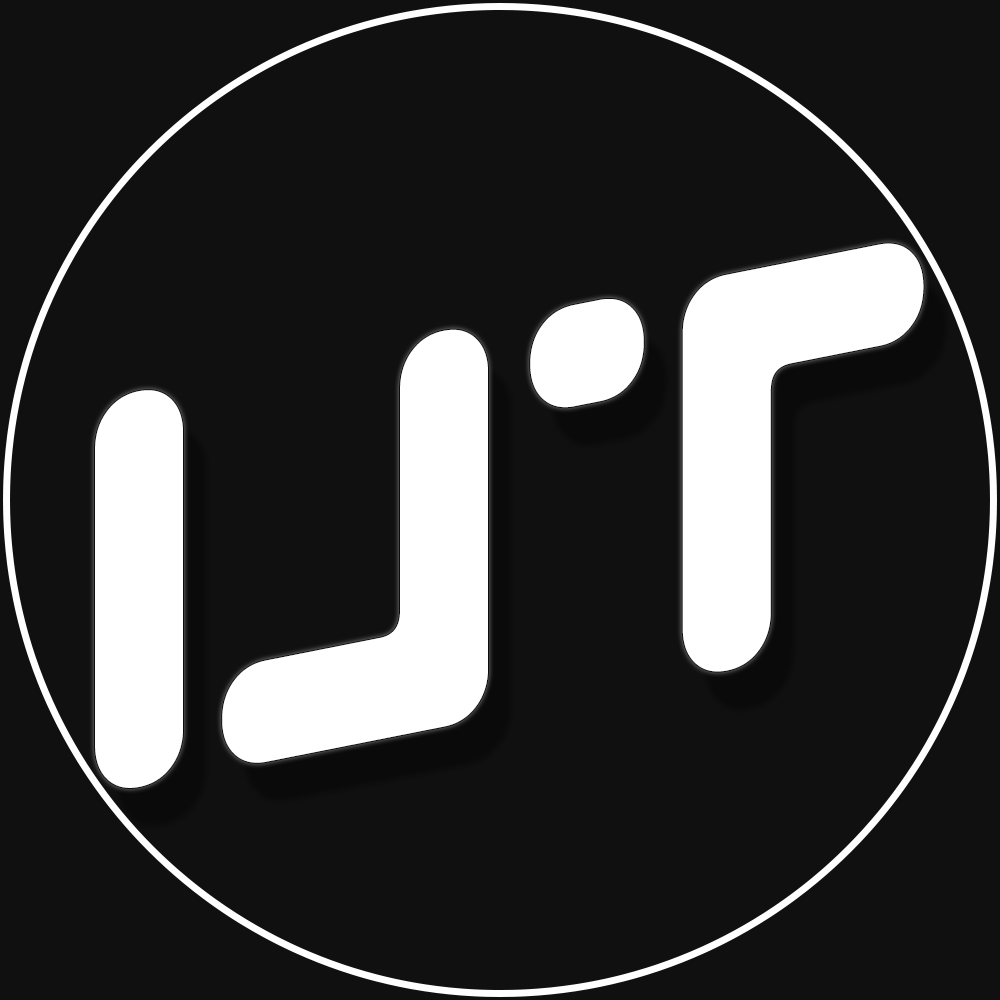
<style>
.page{position:relative;width:1000px;height:1000px;background:#101010}
.page>*{position:absolute;margin:0}
.t1{font:490.5px "AbductionCyr";color:#ffffff;font-weight:bold;scale:0.88 1}
</style>
<div class="page">
<p class="t1" style="left:95px;top:243px;width:829px;height:545px;rotate:-11deg">ut</p>
</div>
